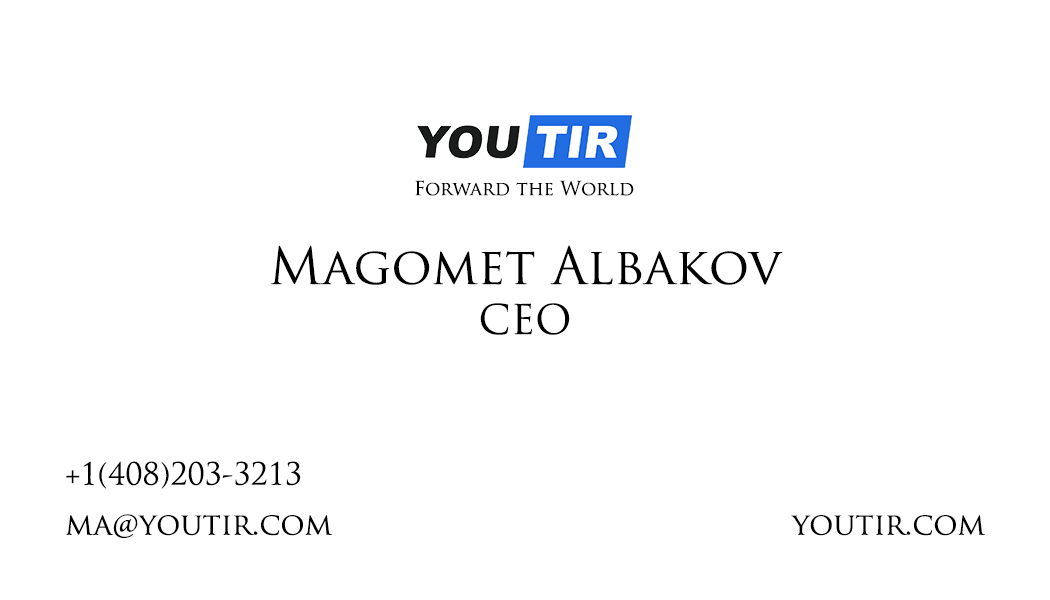
<style>
.page{position:relative;width:1050px;height:600px;background:#ffffff}
.page>*{position:absolute;margin:0}
.t1{font:19px "TrajanPro-Regular";color:#000000}
.t2{font:50px/50px "TrajanPro-Regular";color:#000000}
.t3{font:40px/50px "TrajanPro-Regular";color:#000000}
.t4{font:30px/50px "TrajanPro-Regular";color:#000000}
.t5{font:30px "TrajanPro-Regular";color:#000000}
</style>
<div class="page">
<p class="t1" style="left:415px;top:180px;width:219px;height:16px">Forward the World</p>
<p class="t2" style="left:271px;top:245px;width:512px;height:90px;text-align:justify">Magomet Albakov<br><span class="t3">CEO</span></p>
<p class="t4" style="left:66px;top:461px;width:267px;height:77px;text-align:justify">+1(408)203-3213<br>ma@youtir.com</p>
<p class="t5" style="left:791px;top:515px;width:194px;height:21px">youtir.com</p>
</div>
